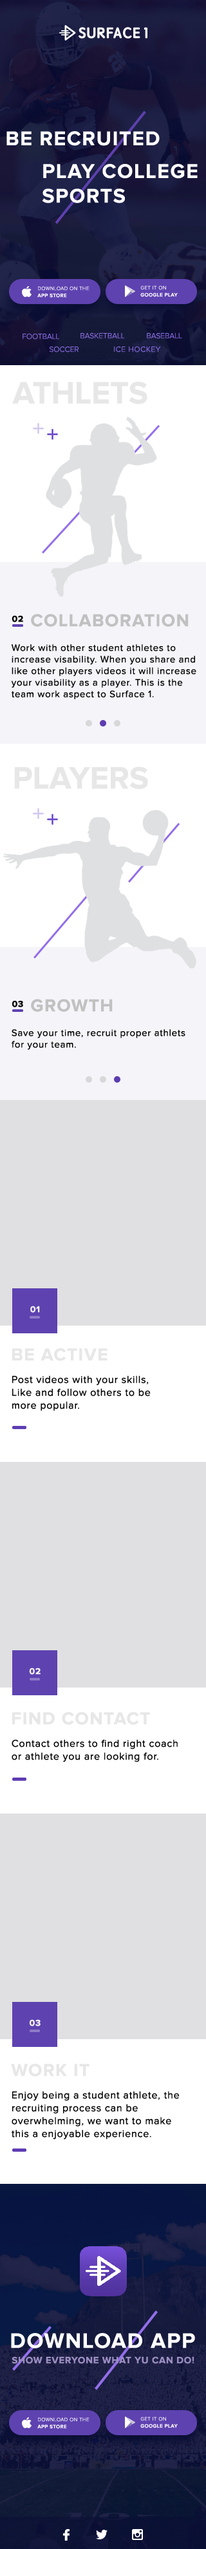
<style>
.page{position:relative;width:206px;height:2549px;background:#ffffff}
.page>*{position:absolute;margin:0}
.t1{font:20.6px "ProximaNova-Bold";letter-spacing:0.05em;color:#ffffff}
.t2{font:5.1px "ProximaNova-Semibold";letter-spacing:0.05em;color:#ffffff;text-transform:uppercase}
.t3{font:5.1px "ProximaNova-Light";letter-spacing:0.05em;color:#ffffff;text-transform:uppercase}
.t4{font:7.7px "ProximaNova-Light";color:#9071ea;text-transform:uppercase}
.t5{font:7.7px "ProximaNova-Light";letter-spacing:0.05em;color:#9071ea;text-transform:uppercase}
.t6{font:32.1px "ProximaNova-Bold";color:#e7e7e7}
.t7{font:9px "ProximaNova-Bold";letter-spacing:0.05em;color:#000000;text-transform:uppercase}
.t8{font:18px "ProximaNova-Bold";letter-spacing:0.05em;color:#c1c1c1;text-transform:uppercase}
.t9{font:9.6px/11.6px "ProximaNova-Regular";letter-spacing:0.05em;color:#000000}
.t10{font:32.1px "ProximaNova-Bold";color:#e7e7e7;text-transform:uppercase}
.t11{font:9px "ProximaNova-Bold";letter-spacing:0.05em;color:#f5f6f7;text-transform:uppercase}
.t12{font:18px "ProximaNova-Bold";letter-spacing:0.05em;color:#e7e7e7;text-transform:uppercase}
.t13{font:10.3px/12.9px "ProximaNova-Regular";letter-spacing:0.05em;color:#000000}
.t14{font:21.9px "ProximaNova-Bold";letter-spacing:0.05em;color:#ffffff;text-transform:uppercase}
.t15{font:9.6px "ProximaNova-Bold";letter-spacing:0.05em;color:#9b8ec1;text-transform:uppercase}
</style>
<div class="page">
<p class="t1" style="left:6px;top:131px;width:153px;height:15px">BE RECRUITED</p>
<p class="t1" style="left:42px;top:164px;width:155px;height:39px">PLAY COLLEGE<br>SPORTS</p>
<p class="t2" style="left:37px;top:293px;width:30px;height:5px">app store</p>
<p class="t3" style="left:38px;top:286px;width:51px;height:5px">download on the</p>
<p class="t3" style="left:140px;top:285px;width:26px;height:5px">get it on</p>
<p class="t2" style="left:140px;top:292px;width:37px;height:5px">google play</p>
<p class="t4" style="left:22px;top:334px;width:37px;height:5px">FOOTBALL</p>
<p class="t4" style="left:80px;top:333px;width:45px;height:6px">BASKETBALL</p>
<p class="t4" style="left:147px;top:333px;width:35px;height:6px">BASEBALL</p>
<p class="t4" style="left:49px;top:346px;width:29px;height:6px">SOcCER</p>
<p class="t5" style="left:114px;top:346px;width:47px;height:6px">ICE HOCKEY</p>
<p class="t6" style="left:12px;top:381px;width:135px;height:23px">ATHLETS</p>
<p class="t7" style="left:12px;top:615px;width:11px;height:7px">02</p>
<p class="t8" style="left:31px;top:614px;width:157px;height:13px">Collaboration</p>
<p class="t9" style="left:11px;top:644px;width:185px;height:55px">Work with other student athletes to  increase visability. When you share and like other players videos it will increase your visability as a player. This is the team work aspect to Surface 1.</p>
<p class="t10" style="left:14px;top:766px;width:134px;height:23px">Players</p>
<p class="t7" style="left:12px;top:1000px;width:11px;height:7px">03</p>
<p class="t8" style="left:31px;top:999px;width:82px;height:13px">Growth</p>
<p class="t9" style="left:12px;top:1029px;width:173px;height:21px">Save your time, recruit proper athlets for your team.</p>
<p class="t11" style="left:30px;top:1306px;width:10px;height:7px">01</p>
<p class="t12" style="left:12px;top:1348px;width:95px;height:13px">Be active</p>
<p class="t13" style="left:12px;top:1376px;width:138px;height:35px">Post videos with your skills,<br>Like and follow others to be <br>more popular.</p>
<p class="t11" style="left:29px;top:1668px;width:11px;height:7px">02</p>
<p class="t12" style="left:12px;top:1712px;width:138px;height:13px">FIND CONTACT</p>
<p class="t13" style="left:12px;top:1740px;width:165px;height:22px">Contact others to find right coach or athlete you are looking for.</p>
<p class="t11" style="left:30px;top:2019px;width:10px;height:7px">03</p>
<p class="t12" style="left:11px;top:2064px;width:78px;height:12px">WORK IT</p>
<p class="t13" style="left:12px;top:2091px;width:167px;height:48px">Enjoy being a student athlete, the recruiting process can be overwhelming, we want to make this a enjoyable experience.</p>
<p class="t14" style="left:11px;top:2333px;width:184px;height:15px">download app</p>
<p class="t15" style="left:12px;top:2357px;width:182px;height:7px">Show everyone what yu can do!</p>
<p class="t3" style="left:38px;top:2417px;width:51px;height:5px">download on the</p>
<p class="t3" style="left:140px;top:2416px;width:26px;height:5px">get it on</p>
<p class="t2" style="left:37px;top:2424px;width:30px;height:5px">app store</p>
<p class="t2" style="left:140px;top:2424px;width:37px;height:4px">google play</p>
</div>
